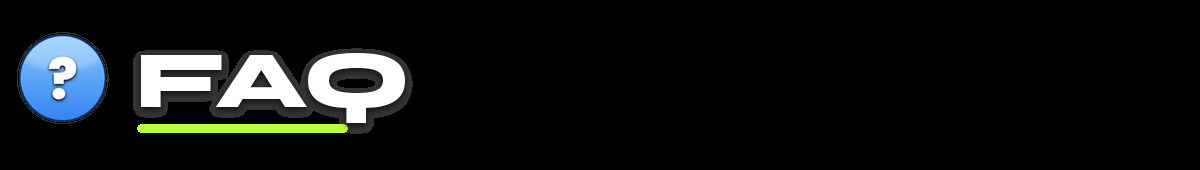
<style>
.page{position:relative;width:1200px;height:170px;background:#000000}
.page>*{position:absolute;margin:0}
.t1{font:80px "Syne-ExtraBold";color:#ffffff}
</style>
<div class="page">
<p class="t1" style="left:141px;top:53px;width:264px;height:70px">FAQ</p>
</div>
